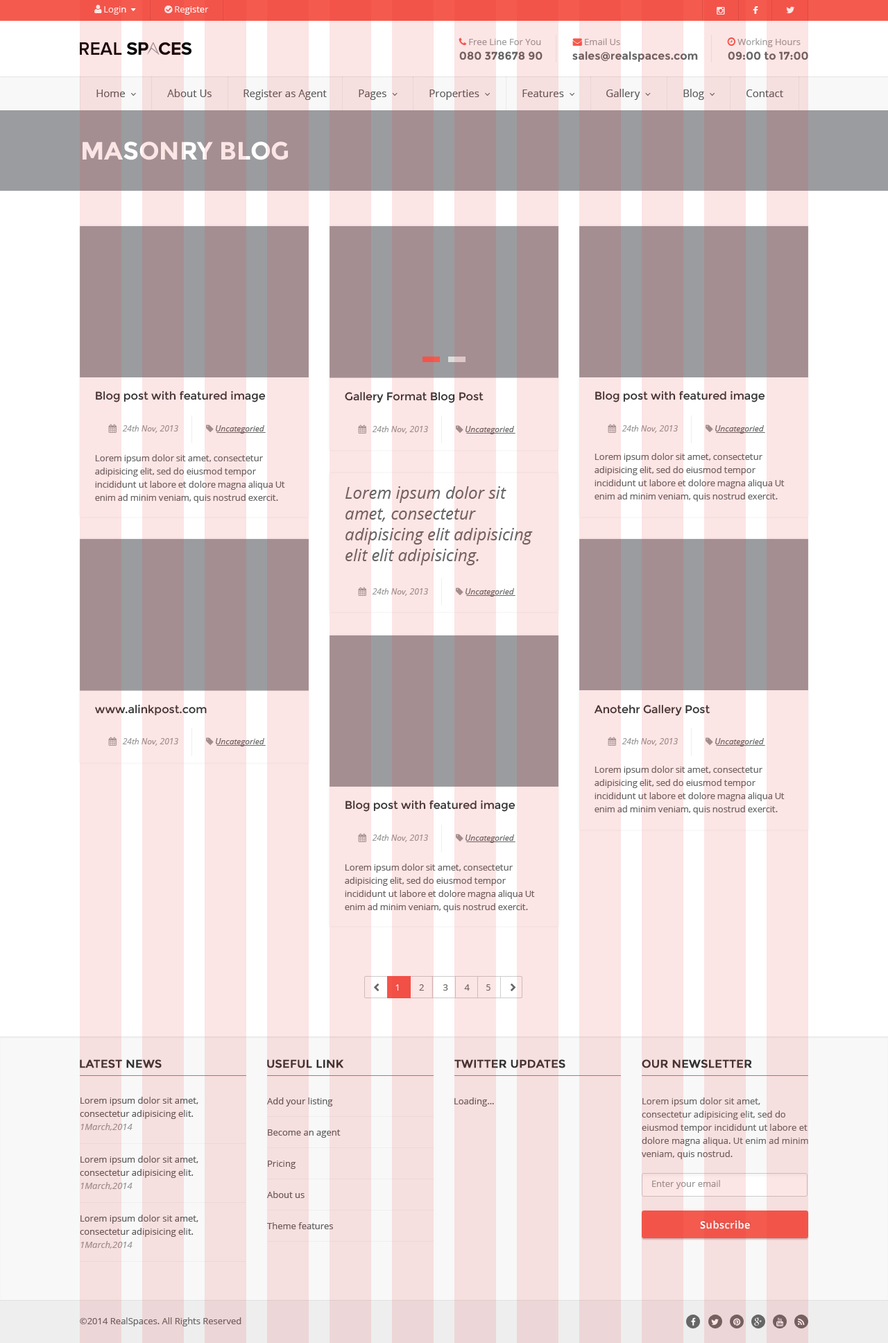
<style>
.page{position:relative;width:888px;height:1343px;background:#ffffff}
.page>*{position:absolute;margin:0}
.t1{font:11.1px "Montserrat-Bold";color:#666666}
.t2{font:10.4px "OpenSans";color:#5e5e5e}
.t3{font:25px "Montserrat-Bold";color:#fce5e5}
.t4{font:11.1px "Montserrat-Regular";color:#333333}
.t5{font:9px/13.2px "OpenSans";color:#666666}
.t6{font:16.6px/20.8px "OpenSans-Italic";color:#666666}
.t7{font:11.1px "Montserrat-Regular";color:#333333;font-weight:bold}
.t8{font:9px/13.2px "OpenSans";color:#5e5e5e}
.t9{font:9px/13.2px "OpenSans-Italic";color:#999999}
.t10{font:9px/31.2px "OpenSans";color:#5e5e5e}
.t11{font:9px "OpenSans";color:#5e5e5e}
.t12{font:9px "OpenSans";color:#999999}
.t13{font:10.4px "OpenSans-Bold";color:#fce5e5}
.t14{font:9px "OpenSans";color:#666666}
</style>
<div class="page">
<p class="t1" style="left:459px;top:51px;width:83px;height:9px">080 378678 90</p>
<p class="t1" style="left:572px;top:51px;width:126px;height:11px">sales@realspaces.com</p>
<p class="t1" style="left:728px;top:51px;width:80px;height:9px">09:00 to 17:00</p>
<p class="t2" style="left:167px;top:89px;width:45px;height:8px">About Us</p>
<p class="t2" style="left:243px;top:89px;width:84px;height:11px">Register as Agent</p>
<p class="t2" style="left:746px;top:89px;width:37px;height:8px">Contact</p>
<p class="t3" style="left:83px;top:142px;width:205px;height:18px">MASONRY BLOG</p>
<p class="t4" style="left:96px;top:391px;width:170px;height:11px">Blog post with featured image</p>
<p class="t4" style="left:345px;top:392px;width:138px;height:11px">Gallery Format Blog Post</p>
<p class="t4" style="left:595px;top:391px;width:170px;height:11px">Blog post with featured image</p>
<p class="t5" style="left:95px;top:454px;width:190px;height:49px">Lorem ipsum dolor sit amet, consectetur adipisicing elit, sed do eiusmod tempor incididunt ut labore et dolore magna aliqua Ut enim ad minim veniam, quis nostrud exercit.</p>
<p class="t5" style="left:594px;top:453px;width:191px;height:49px">Lorem ipsum dolor sit amet, consectetur adipisicing elit, sed do eiusmod tempor incididunt ut labore et dolore magna aliqua Ut enim ad minim veniam, quis nostrud exercit.</p>
<p class="t6" style="left:345px;top:486px;width:188px;height:79px">Lorem ipsum dolor sit amet, consectetur adipisicing elit adipisicing elit elit adipisicing.</p>
<p class="t4" style="left:95px;top:704px;width:112px;height:12px">www.alinkpost.com</p>
<p class="t4" style="left:594px;top:705px;width:116px;height:11px">Anotehr Gallery Post</p>
<p class="t5" style="left:594px;top:766px;width:191px;height:48px">Lorem ipsum dolor sit amet, consectetur adipisicing elit, sed do eiusmod tempor incididunt ut labore et dolore magna aliqua Ut enim ad minim veniam, quis nostrud exercit.</p>
<p class="t4" style="left:345px;top:800px;width:170px;height:12px">Blog post with featured image</p>
<p class="t5" style="left:345px;top:864px;width:190px;height:48px">Lorem ipsum dolor sit amet, consectetur adipisicing elit, sed do eiusmod tempor incididunt ut labore et dolore magna aliqua Ut enim ad minim veniam, quis nostrud exercit.</p>
<p class="t7" style="left:80px;top:1059px;width:82px;height:9px">LATEST NEWS</p>
<p class="t7" style="left:267px;top:1059px;width:76px;height:9px">USEFUL LINK</p>
<p class="t7" style="left:454px;top:1059px;width:111px;height:9px">TWITTER UPDATES</p>
<p class="t7" style="left:642px;top:1059px;width:110px;height:9px">OUR NEWSLETTER</p>
<p class="t8" style="left:80px;top:1097px;width:118px;height:34px">Lorem ipsum dolor sit amet, consectetur adipisicing elit.<br><span class="t9">1March,2014</span></p>
<p class="t10" style="left:267px;top:1097px;width:74px;height:132px">Add your listing<br>Become an agent<br>Pricing<br>About us<br>Theme features</p>
<p class="t11" style="left:454px;top:1097px;width:40px;height:9px">Loading...</p>
<p class="t5" style="left:642px;top:1097px;width:166px;height:62px">Lorem ipsum dolor sit amet, consectetur adipisicing elit, sed do eiusmod tempor incididunt ut labore et dolore magna aliqua. Ut enim ad minim veniam, quis nostrud.</p>
<p class="t8" style="left:80px;top:1156px;width:118px;height:34px">Lorem ipsum dolor sit amet, consectetur adipisicing elit.<br><span class="t9">1March,2014</span></p>
<p class="t12" style="left:652px;top:1180px;width:68px;height:9px">Enter your email</p>
<p class="t8" style="left:80px;top:1215px;width:118px;height:34px">Lorem ipsum dolor sit amet, consectetur adipisicing elit.<br><span class="t9">1March,2014</span></p>
<p class="t13" style="left:700px;top:1220px;width:50px;height:9px">Subscribe</p>
<p class="t14" style="left:80px;top:1317px;width:161px;height:9px">©2014 RealSpaces. All Rights Reserved</p>
</div>
